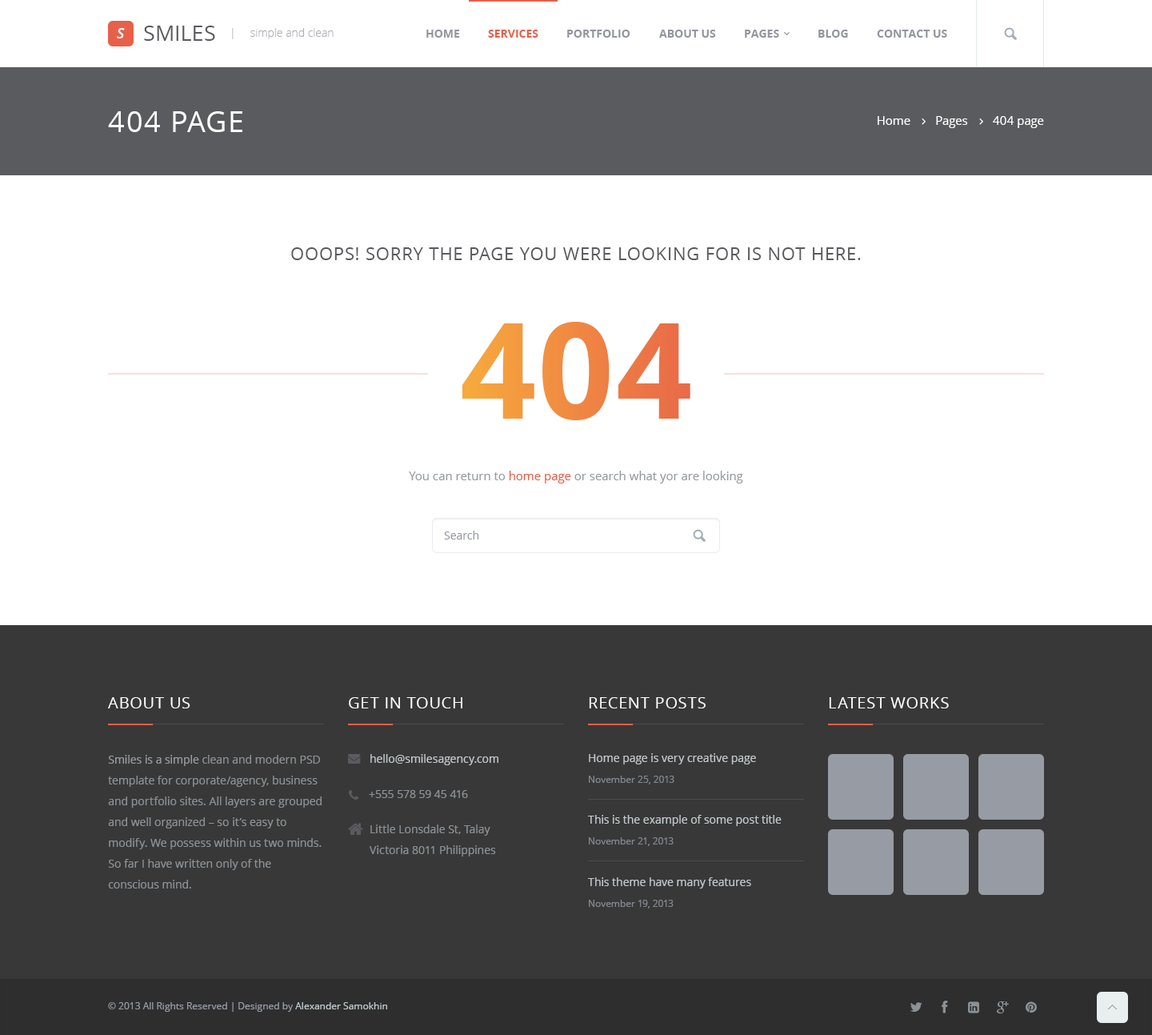
<style>
.page{position:relative;width:1152px;height:1035px;background:#ffffff}
.page>*{position:absolute;margin:0}
.t1{font:14.4px "OpenSans-SemiboldItalic";color:#ffffff}
.t2{font:21.6px "OpenSans";color:#5a5b5f}
.t3{font:11.2px "OpenSans-Light";color:#abaeb5}
.t4{font:11.2px "OpenSans-Bold";color:#93969f}
.t5{font:11.2px "OpenSans-Bold";color:#e7604a}
.t6{font:28.8px "OpenSans";letter-spacing:0.04em;color:#ffffff}
.t7{font:12px "OpenSans";color:#ffffff}
.t8{font:17.6px "OpenSans";letter-spacing:0.04em;color:#5a5b5f;text-transform:uppercase}
.t9{font:133.6px "OpenSans-Bold"}
.t10{font:12px "OpenSans";color:#979ba3}
.t11{font:12px "OpenSans";color:#e7604a}
.t12{font:11.2px "OpenSans";color:#979ba3}
.t13{font:16px "OpenSans";letter-spacing:0.04em;color:#fafcfc}
.t14{font:11.2px/20.8px "OpenSans";color:#8c9195}
.t15{font:11.2px/20.8px "OpenSans";color:#979ba3}
.t16{font:11.2px "OpenSans";color:#c2c9cc}
.t17{font:11.2px/20.8px "OpenSans";color:#c2c9cc}
.t18{font:9.6px/20.8px "OpenSans";color:#848890}
.t19{font:11.2px "OpenSans";color:#8c9195}
.t20{font:9.6px "OpenSans";color:#979ba3}
.t21{font:9.6px "OpenSans";color:#c2c9cc}
</style>
<div class="page">
<p class="t1" style="left:117px;top:28px;width:8px;height:10px">S</p>
<p class="t2" style="left:144px;top:26px;width:71px;height:15px">SMILES</p>
<p class="t3" style="left:232px;top:28px;width:102px;height:11px">|     simple and clean</p>
<p class="t4" style="left:427px;top:30px;width:33px;height:8px">HOME</p>
<p class="t5" style="left:488px;top:30px;width:51px;height:8px">SERVICES</p>
<p class="t4" style="left:567px;top:30px;width:64px;height:8px">PORTFOLIO</p>
<p class="t4" style="left:659px;top:30px;width:57px;height:8px">ABOUT US</p>
<p class="t4" style="left:745px;top:30px;width:34px;height:8px">PAGES</p>
<p class="t4" style="left:819px;top:30px;width:29px;height:8px">BLOG</p>
<p class="t4" style="left:877px;top:30px;width:71px;height:8px">CONTACT US</p>
<p class="t6" style="left:108px;top:111px;width:134px;height:21px">404 PAGE</p>
<p class="t7" style="left:878px;top:116px;width:166px;height:12px">Home        Pages        404 page</p>
<p class="t8" style="left:291px;top:247px;width:570px;height:13px">Ooops! Sorry the page you were looking for is not here.</p>
<p class="t9" style="left:462px;top:322px;width:229px;height:98px">404</p>
<p class="t10" style="left:409px;top:471px;width:334px;height:12px">You can return to <span class="t11">home page</span> or search what yor are looking</p>
<p class="t12" style="left:444px;top:531px;width:35px;height:8px">Search</p>
<p class="t13" style="left:108px;top:697px;width:82px;height:11px">ABOUT US</p>
<p class="t13" style="left:349px;top:697px;width:114px;height:11px">GET IN TOUCH</p>
<p class="t13" style="left:589px;top:697px;width:117px;height:11px">RECENT POSTS</p>
<p class="t13" style="left:829px;top:697px;width:120px;height:11px">LATEST WORKS</p>
<p class="t14" style="left:108px;top:755px;width:214px;height:133px"><span class="t15">Smiles is a simple</span> clean and modern PSD template for corporate/agency, business and portfolio sites. All layers are grouped and well organized – so it’s easy to modify. We possess within us two minds. So far I have written only of the conscious mind.</p>
<p class="t16" style="left:371px;top:754px;width:128px;height:11px">hello@smilesagency.com</p>
<p class="t17" style="left:589px;top:753px;width:167px;height:31px">Home page is very creative page<br><span class="t18">November 25, 2013</span></p>
<p class="t19" style="left:369px;top:790px;width:99px;height:8px">+555 578 59 45 416</p>
<p class="t17" style="left:588px;top:815px;width:194px;height:31px">This is the example of some post title<br><span class="t18">November 21, 2013</span></p>
<p class="t14" style="left:370px;top:824px;width:126px;height:32px">Little Lonsdale St, Talay<br>Victoria 8011 Philippines</p>
<p class="t17" style="left:588px;top:877px;width:163px;height:31px">This theme have many features<br><span class="t18">November 19, 2013</span></p>
<p class="t20" style="left:108px;top:1002px;width:279px;height:10px">© 2013 All Rights Reserved | Designed by <span class="t21">Alexander Samokhin</span></p>
</div>
